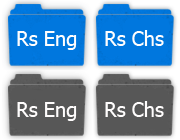
<style>
.page{position:relative;width:180px;height:140px;background:#575757}
.page>*{position:absolute;margin:0}
.t1{font:20px "Tahoma";color:#fffdfd}
</style>
<div class="page">
<p class="t1" style="left:105px;top:30px;width:59px;height:16px">Rs Chs</p>
<p class="t1" style="left:17px;top:31px;width:60px;height:19px">Rs Eng</p>
<p class="t1" style="left:17px;top:102px;width:60px;height:19px">Rs Eng</p>
<p class="t1" style="left:105px;top:101px;width:59px;height:16px">Rs Chs</p>
</div>
